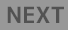
<style>
.page{position:relative;width:68px;height:30px;background:#989898}
.page>*{position:absolute;margin:0}
.t1{font:22.4px "MPLUS1p-Bold";color:#525252}
</style>
<div class="page">
<p class="t1" style="left:7px;top:6px;width:57px;height:17px">NEXT</p>
</div>
